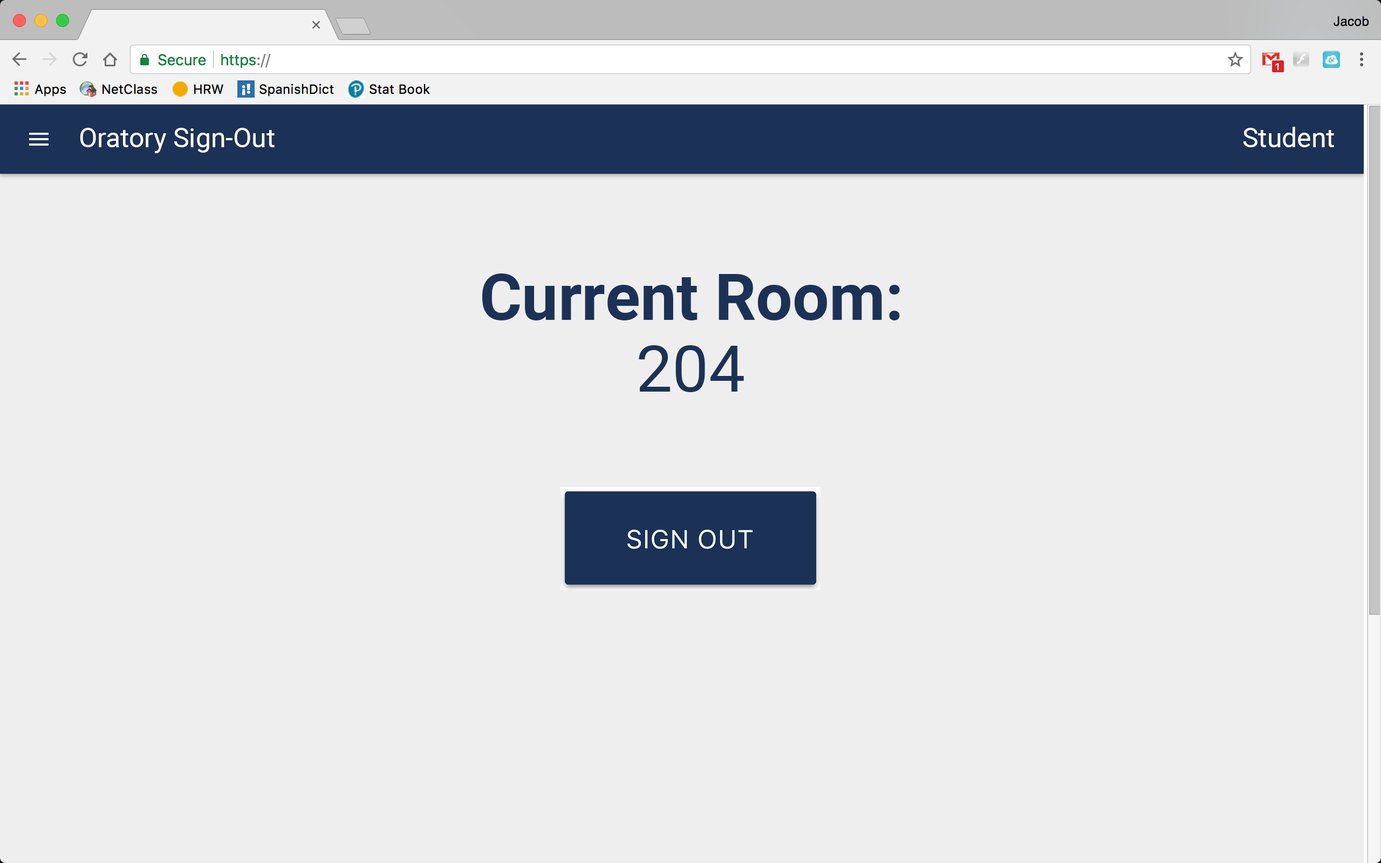
<style>
.page{position:relative;width:1381px;height:863px;background:#eeeeee}
.page>*{position:absolute;margin:0}
.t1{font:27px "Roboto-Regular";color:#ffffff}
.t2{font:64.7px "Roboto-Bold";color:#1c3156}
.t3{font:64.7px "Roboto-Regular";color:#1c3156}
</style>
<div class="page">
<p class="t1" style="left:80px;top:128px;width:195px;height:25px">Oratory Sign-Out</p>
<p class="t1" style="left:1244px;top:127px;width:90px;height:20px">Student</p>
<p class="t2" style="left:482px;top:274px;width:418px;height:46px">Current Room:</p>
<p class="t3" style="left:639px;top:345px;width:105px;height:47px">204</p>
</div>
